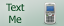
<style>
.page{position:relative;width:64px;height:26px}
.page>*{position:absolute;margin:0}
.t1{font:10px "Tahoma";color:#004018}
</style>
<div class="page">
<p class="t1" style="left:6px;top:3px;width:19px;height:20px;text-align:center">Text<br>Me</p>
</div>
